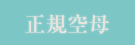
<style>
.page{position:relative;width:135px;height:45px;background:#7dc6c6}
.page>*{position:absolute;margin:0}
.t1{font:21px "RyuminPro-Medium";color:#f4e6df}
</style>
<div class="page">
<p class="t1" style="left:25px;top:14px;width:84px;height:20px">正規空母</p>
</div>
